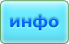
<style>
.page{position:relative;width:69px;height:44px}
.page>*{position:absolute;margin:0}
.t1{font:16px "Verdana-Bold";color:#0069f8}
</style>
<div class="page">
<p class="t1" style="left:10px;top:14px;width:49px;height:17px">инфо</p>
</div>
